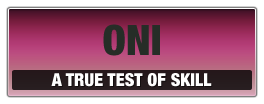
<style>
.page{position:relative;width:264px;height:104px}
.page>*{position:absolute;margin:0}
.t1{font:42px "HelveticaNeueLTStd-BlkCn";color:#262d27;text-transform:uppercase}
.t2{font:18px "HelveticaNeueLTStd-BlkCn";color:#ffffff}
</style>
<div class="page">
<p class="t1" style="left:103px;top:24px;width:57px;height:32px">ONI</p>
<p class="t2" style="left:51px;top:73px;width:161px;height:14px">A TRUE TEST OF SKILL</p>
</div>
